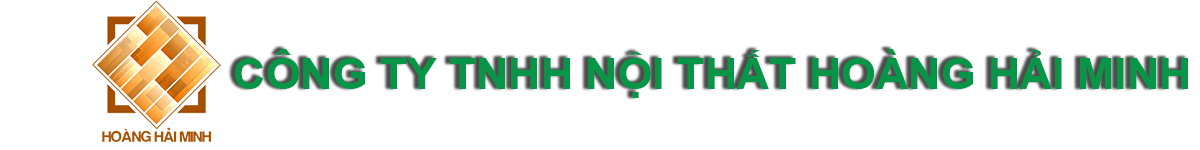
<style>
.page{position:relative;width:1200px;height:150px;background:#ffffff}
.page>*{position:absolute;margin:0}
.t1{font:42.8px "Arial-BoldMT";color:#059647;scale:1.04 1}
</style>
<div class="page">
<p class="t1" style="left:235px;top:49px;width:953px;height:49px">CÔNG TY TNHH NỘI THẤT HOÀNG HẢI MINH</p>
</div>
